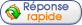
<style>
.page{position:relative;width:82px;height:25px}
.page>*{position:absolute;margin:0}
.t1{font:11px "Decker-Bold";color:#5367a1;font-weight:bold}
.t2{font:11px "Decker-Bold";color:#ff9900;font-weight:bold}
</style>
<div class="page">
<p class="t1" style="left:23px;top:1px;width:46px;height:12px">Réponse</p>
<p class="t2" style="left:27px;top:12px;width:35px;height:11px">rapide</p>
</div>
